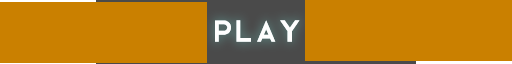
<style>
.page{position:relative;width:512px;height:64px;background:#ca8000}
.page>*{position:absolute;margin:0}
.t1{font:30px "CocoPuff-Regular";letter-spacing:0.025em;color:#fefefe}
</style>
<div class="page">
<p class="t1" style="left:215px;top:20px;width:85px;height:22px">PLAY</p>
<p class="t1" style="left:215px;top:20px;width:85px;height:22px">PLAY</p>
</div>
